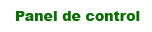
<style>
.page{position:relative;width:152px;height:32px;background:#ffffff}
.page>*{position:absolute;margin:0}
.t1{font:14px "Arial-Black";color:#0d6d07}
</style>
<div class="page">
<p class="t1" style="left:16px;top:11px;width:124px;height:10px">Panel de control</p>
</div>
